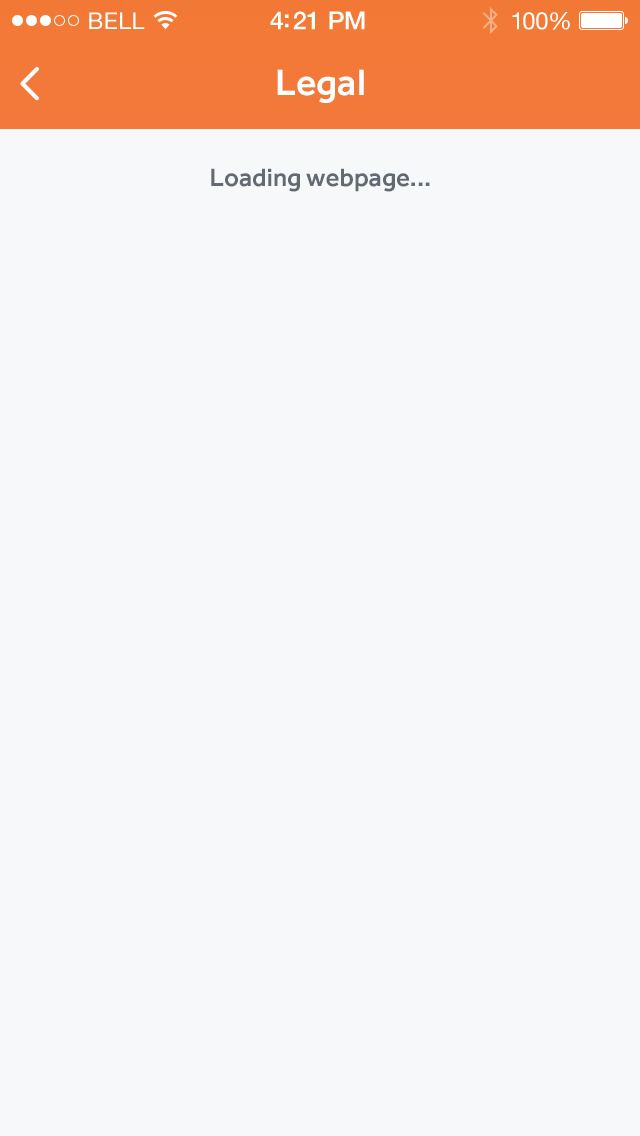
<style>
.page{position:relative;width:640px;height:1136px;background:#f6f8fa}
.page>*{position:absolute;margin:0}
.t1{font:23px "HelveticaNeue";letter-spacing:0.02em;color:#ffffff}
.t2{font:25px "HelveticaNeue-Medium";letter-spacing:-0.02em;color:#ffffff}
.t3{font:24px "HelveticaNeue";letter-spacing:-0.02em;color:#ffffff}
.t4{font:38px "Effra-Medium";color:#ffffff}
.t5{font:26px "Effra-Medium";color:#626a73}
</style>
<div class="page">
<p class="t1" style="left:89px;top:12px;width:56px;height:17px">BELL</p>
<p class="t2" style="left:270px;top:11px;width:95px;height:19px">4:21 PM</p>
<p class="t3" style="left:512px;top:12px;width:58px;height:18px">100%</p>
<p class="t4" style="left:277px;top:69px;width:87px;height:34px">Legal</p>
<p class="t5" style="left:211px;top:168px;width:219px;height:24px">Loading webpage...</p>
</div>
